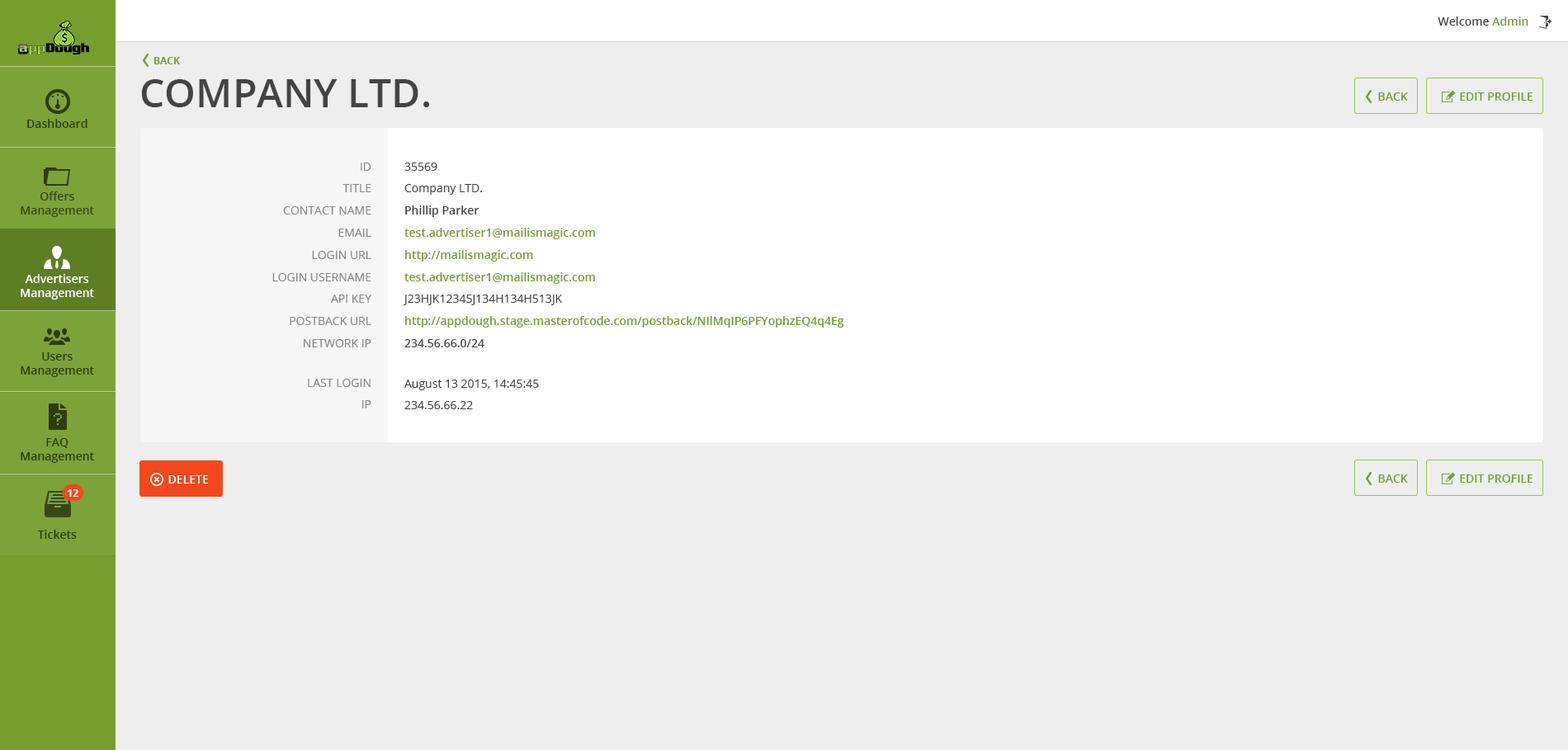
<style>
.page{position:relative;width:1568px;height:750px;background:#eeeeee}
.page>*{position:absolute;margin:0}
.t1{font:11.6px "OpenSans-Semibold";color:#444444}
.t2{font:11.6px "OpenSans-Semibold";color:#759e2d}
.t3{font:9.9px "OpenSans-Bold";color:#759e2d;text-transform:uppercase}
.t4{font:39.6px "OpenSans-Semibold";color:#444444;text-transform:uppercase}
.t5{font:11.6px "OpenSans-Semibold";color:#759e2d;text-transform:uppercase}
.t6{font:11.6px "OpenSans-Semibold";color:#2d3d0f}
.t7{font:11.6px "OpenSans";color:#888888;text-transform:uppercase}
.t8{font:11.6px "OpenSans";color:#444444}
.t9{font:11.6px "OpenSans-Semibold";color:#ffffff}
.t10{font:11.6px "OpenSans-Semibold";color:#ffffff;text-transform:uppercase}
.t11{font:9.9px "OpenSans-Bold";color:#ffffff}
</style>
<div class="page">
<p class="t1" style="left:1438px;top:17px;width:90px;height:9px">Welcome <span class="t2">Admin</span></p>
<p class="t3" style="left:154px;top:57px;width:26px;height:7px">Back</p>
<p class="t4" style="left:141px;top:79px;width:289px;height:28px">Company LTD.</p>
<p class="t5" style="left:1378px;top:92px;width:30px;height:9px">Back</p>
<p class="t5" style="left:1460px;top:92px;width:73px;height:9px">Edit Profile</p>
<p class="t6" style="left:27px;top:119px;width:60px;height:9px">Dashboard</p>
<p class="t7" style="left:272px;top:163px;width:100px;height:184px;text-align:right">ID<br>Title<br>Contact NAme<br>Email<br>Login URL<br>Login Username<br>API Key<br>Postback URL<br>Network IP</p>
<p class="t2" style="left:403px;top:163px;width:441px;height:184px"><span class="t8">35569<br>Company LTD.<br></span><span class="t1">Phillip Parker<br></span>test.advertiser1@mailismagic.com<br>http://mailismagic.com<br>test.advertiser1@mailismagic.com<br><span class="t8">J23HJK12345J134H134H513JK<br></span>http://appdough.stage.masterofcode.com/postback/NIlMqIP6PFYophzEQ4q4Eg<br><span class="t1">234.56.66.0/24</span></p>
<p class="t6" style="left:21px;top:191px;width:73px;height:26px;text-align:center">Offers Management</p>
<p class="t9" style="left:21px;top:274px;width:73px;height:26px;text-align:center">Advertisers Management</p>
<p class="t6" style="left:21px;top:352px;width:73px;height:25px;text-align:center">Users Management</p>
<p class="t7" style="left:308px;top:379px;width:63px;height:30px;text-align:right">Last Login<br>IP</p>
<p class="t8" style="left:404px;top:380px;width:135px;height:29px">August 13 2015, 14:45:45<br>234.56.66.22</p>
<p class="t6" style="left:21px;top:438px;width:73px;height:25px;text-align:center">FAQ Management</p>
<p class="t10" style="left:168px;top:475px;width:41px;height:9px">Delete</p>
<p class="t5" style="left:1378px;top:475px;width:30px;height:8px">Back</p>
<p class="t5" style="left:1460px;top:475px;width:73px;height:8px">Edit Profile</p>
<p class="t11" style="left:68px;top:489px;width:10px;height:8px">12</p>
<p class="t6" style="left:37px;top:530px;width:40px;height:9px">Tickets</p>
</div>
